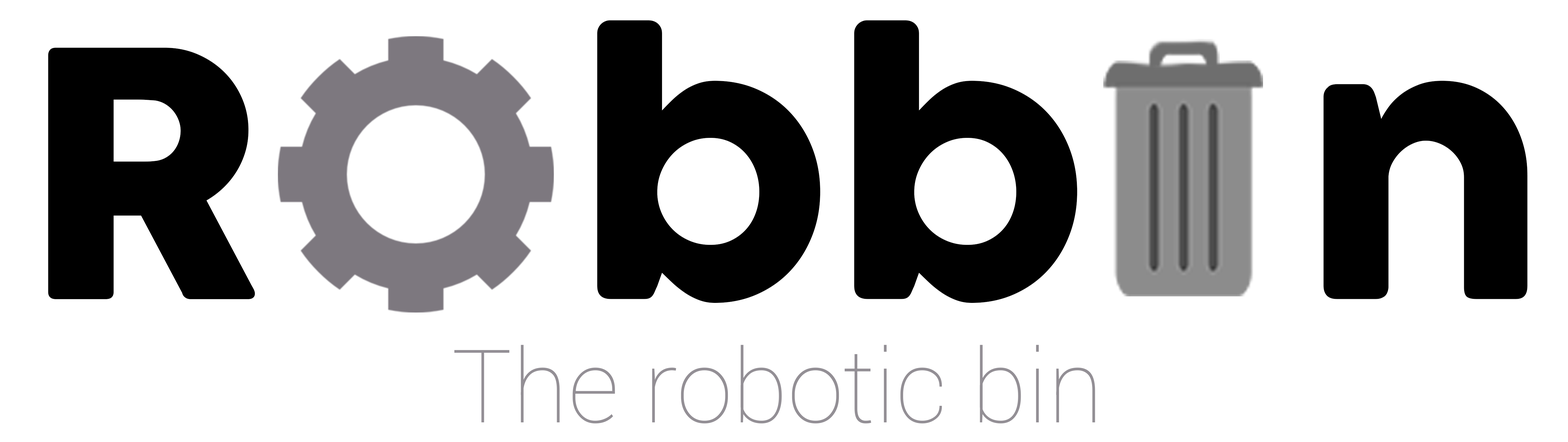
<style>
.page{position:relative;width:1568px;height:442px;background:#ffffff}
.page>*{position:absolute;margin:0}
.t1{font:338.7px "COCOGOOSE";color:#000000}
.t2{font:101.6px "Roboto-Thin";color:#938f95}
</style>
<div class="page">
<p class="t1" style="left:48px;top:20px;width:1479px;height:283px">R   bb  n</p>
<p class="t2" style="left:454px;top:345px;width:641px;height:78px">The robotic bin</p>
</div>
